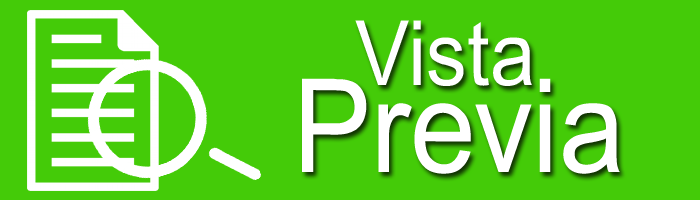
<style>
.page{position:relative;width:700px;height:200px;background:#44cb08}
.page>*{position:absolute;margin:0}
.t1{font:90px "ArialMT";color:#ffffff;scale:0.9 1}
.t2{font:130px "ArialMT";color:#ffffff;scale:0.9 1}
</style>
<div class="page">
<p class="t1" style="left:355px;top:20px;width:177px;height:66px">Vista</p>
<p class="t2" style="left:302px;top:78px;width:318px;height:96px">Previa</p>
</div>
